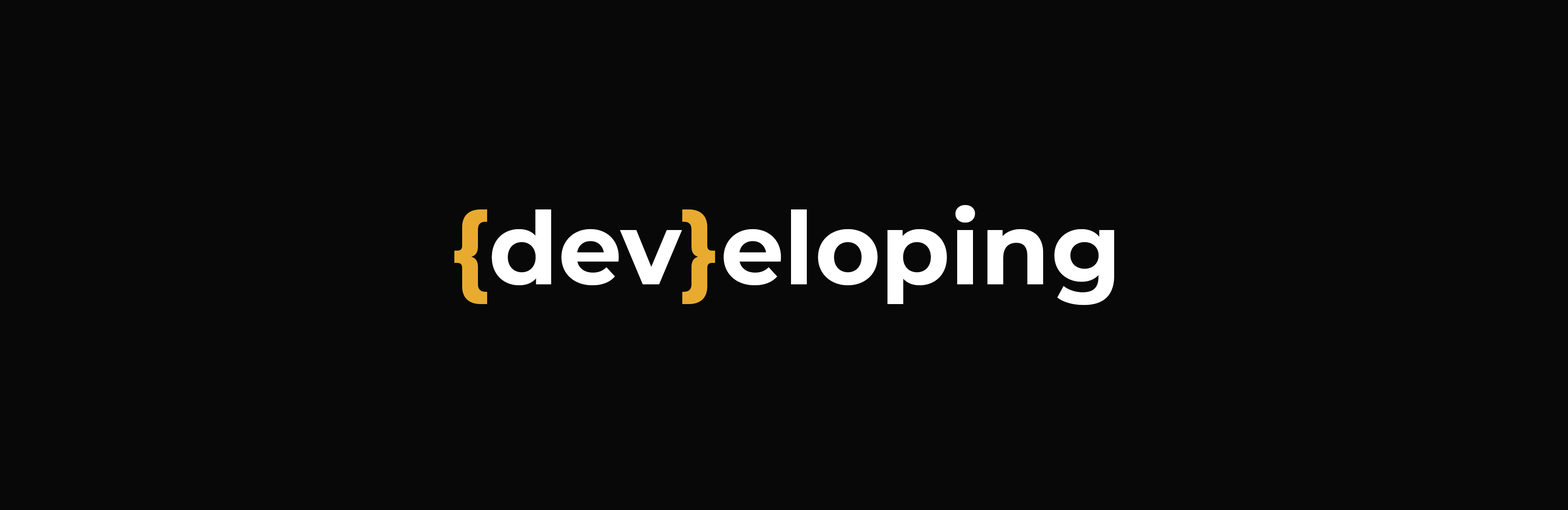
<style>
.page{position:relative;width:1568px;height:510px;background:#080808}
.page>*{position:absolute;margin:0}
.t1{font:100.9px "Montserrat-Bold";color:#ffffff}
.t2{font:100.9px "Montserrat-Bold";color:#e8ab30}
</style>
<div class="page">
<p class="t1" style="left:454px;top:205px;width:660px;height:100px"><span class="t2">{</span>dev<span class="t2">}</span>eloping</p>
</div>
